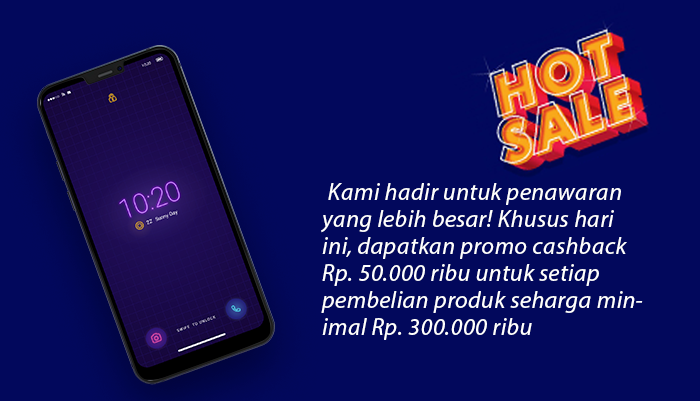
<style>
.page{position:relative;width:700px;height:401px;background:#02085c}
.page>*{position:absolute;margin:0}
.t1{font:24px/27px "MyriadPro-It";letter-spacing:0.02em;color:#ffffff}
.t2{font:30px/27px "MyriadPro-It";letter-spacing:0.02em;color:#ffffff}
</style>
<div class="page">
<p class="t1" style="left:321px;top:183px;width:322px;height:157px"><span class="t2"> </span>Kami hadir untuk penawaran yang lebih besar! Khusus hari ini, dapatkan promo cashback Rp. 50.000 ribu untuk setiap pembelian produk seharga minimal Rp. 300.000 ribu</p>
</div>
